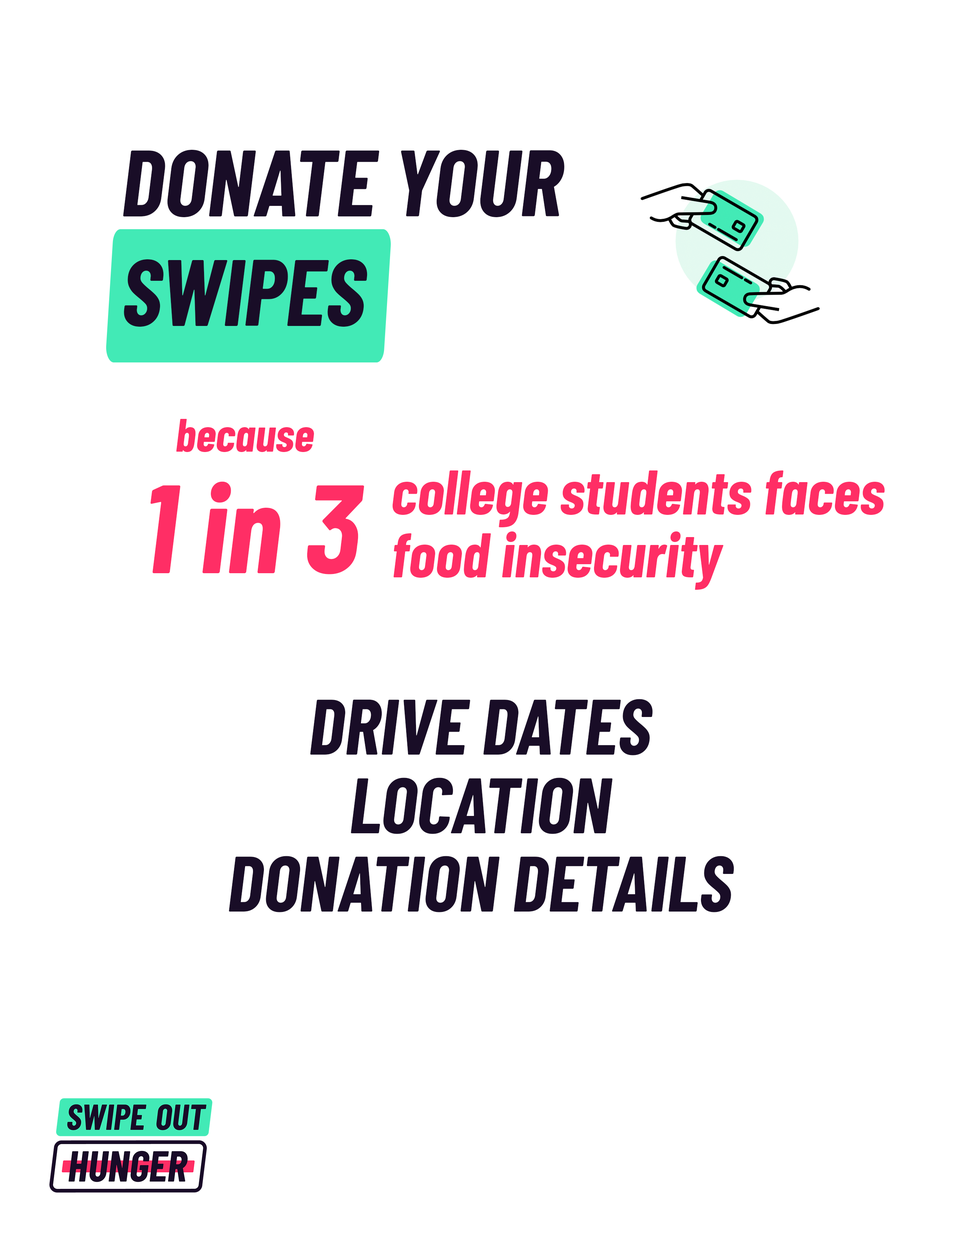
<style>
.page{position:relative;width:960px;height:1242px;background:#ffffff}
.page>*{position:absolute;margin:0}
.t1{font:94.1px/109.8px "BarlowCondensed-BoldItalic";letter-spacing:-0.005em;color:#190d27}
.t2{font:47.1px "BarlowCondensed-BoldItalic";letter-spacing:-0.005em;color:#ff2e65}
.t3{font:62.7px/62.7px "BarlowCondensed-BoldItalic";letter-spacing:-0.005em;color:#ff2e65}
.t4{font:125.5px "BarlowCondensed-BoldItalic";letter-spacing:-0.005em;color:#ff2e65}
.t5{font:78.4px/78.4px "BarlowCondensed-BoldItalic";letter-spacing:-0.005em;color:#190d27}
</style>
<div class="page">
<p class="t1" style="left:123px;top:150px;width:441px;height:177px">DONATE YOUR <br>SWIPES</p>
<p class="t2" style="left:176px;top:419px;width:138px;height:33px">because</p>
<p class="t3" style="left:392px;top:471px;width:493px;height:119px">college students faces food insecurity</p>
<p class="t4" style="left:150px;top:481px;width:214px;height:93px">1 in 3</p>
<p class="t5" style="left:229px;top:699px;width:505px;height:213px;text-align:center">DRIVE DATES<br>LOCATION<br>DONATION DETAILS</p>
</div>
